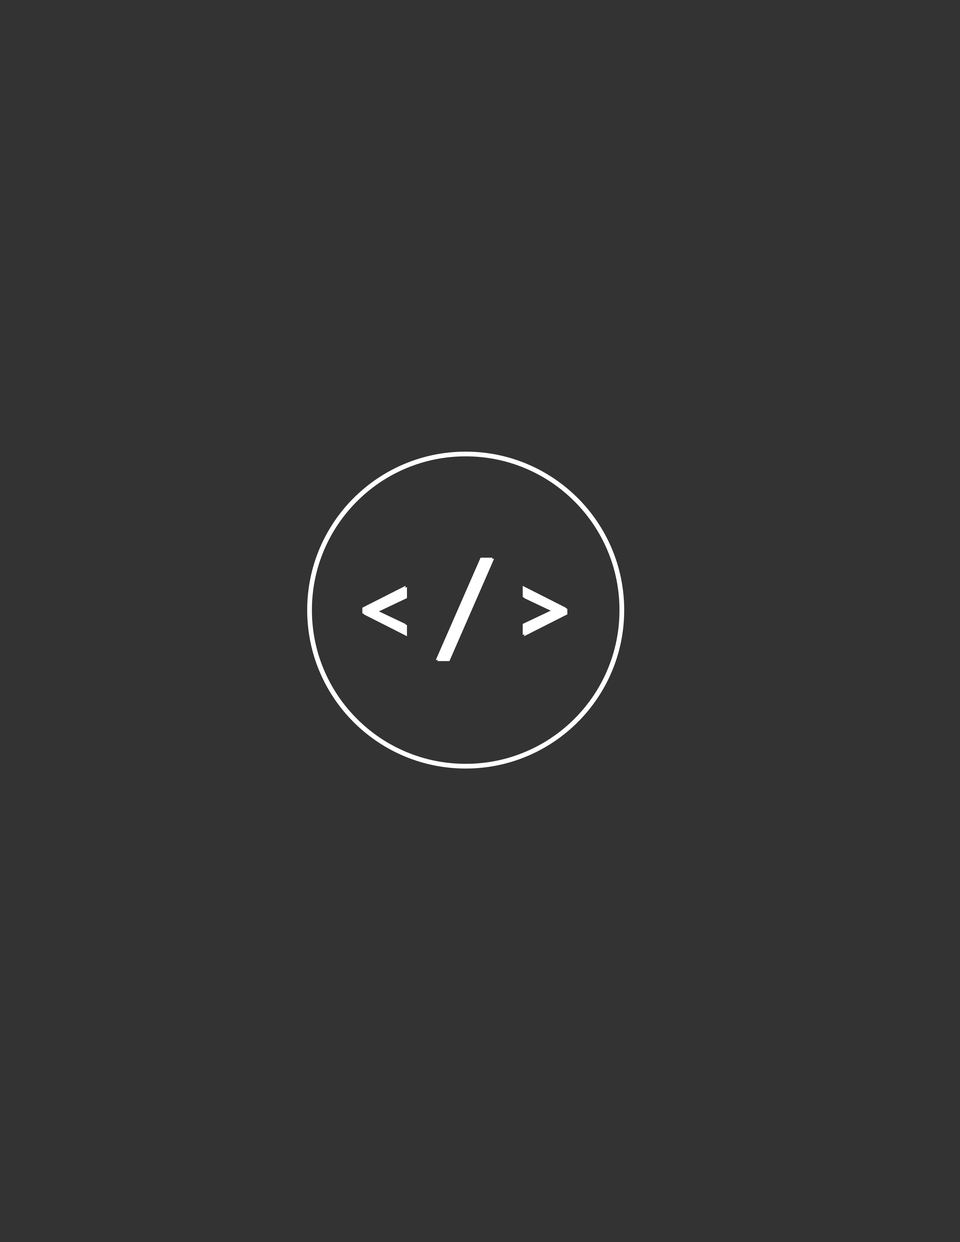
<style>
.page{position:relative;width:960px;height:1242px;background:#333333}
.page>*{position:absolute;margin:0}
.t1{font:112.9px "KlinicSlab-Bold";letter-spacing:0.2em;color:#ffffff}
</style>
<div class="page">
<p class="t1" style="left:362px;top:558px;width:204px;height:102px">&lt;/&gt;</p>
<p class="t1" style="left:364px;top:559px;width:203px;height:102px">&lt;/&gt;</p>
</div>
